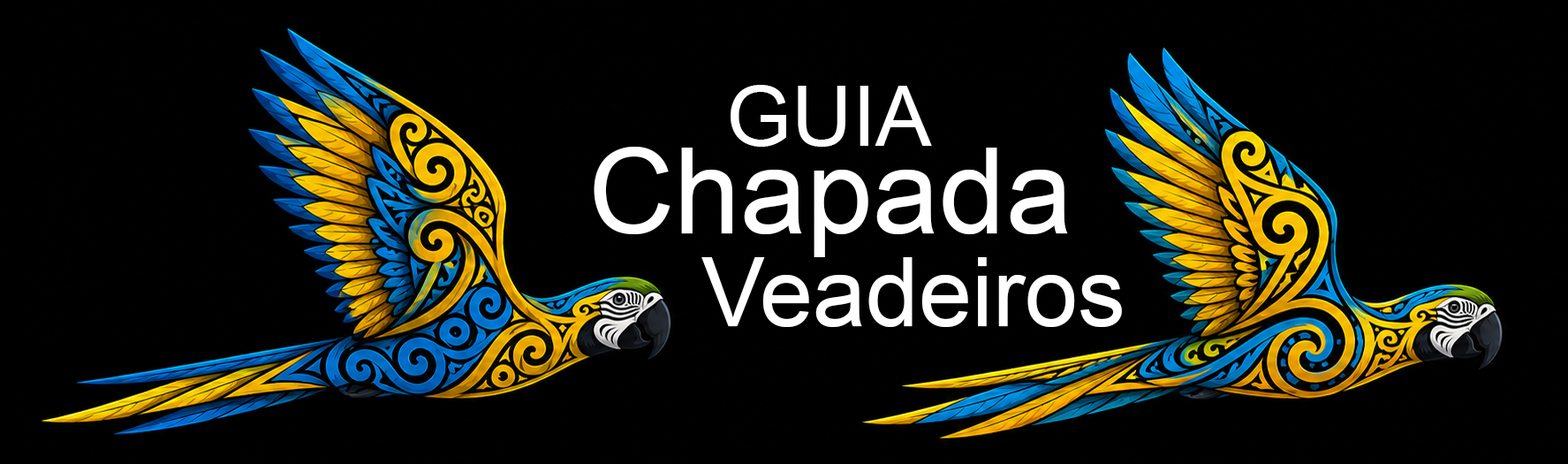
<style>
.page{position:relative;width:1568px;height:464px;background:#000000}
.page>*{position:absolute;margin:0}
.t1{font:83.9px "ArialMT";color:#ffffff}
.t2{font:119.3px "ArialMT";color:#ffffff}
.t3{font:95.4px "ArialMT";color:#ffffff}
</style>
<div class="page">
<p class="t1" style="left:731px;top:85px;width:201px;height:62px">GUIA</p>
<p class="t2" style="left:594px;top:147px;width:474px;height:110px">Chapada</p>
<p class="t3" style="left:701px;top:257px;width:421px;height:70px">Veadeiros</p>
</div>
